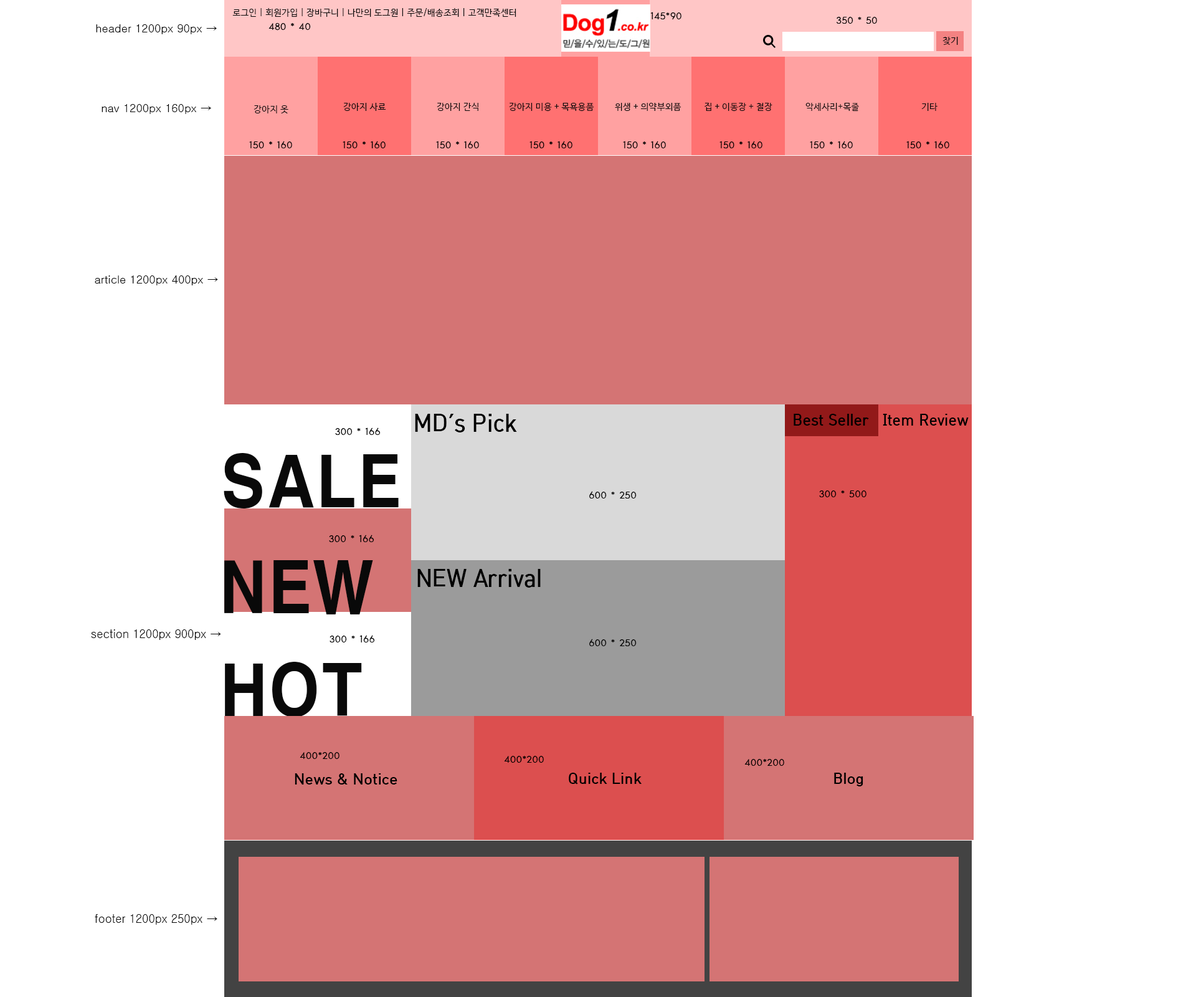
<style>
.page{position:relative;width:1196px;height:997px;background:#ffffff}
.page>*{position:absolute;margin:0}
.t1{font:8.7px "HancomGothicRegular";color:#090909}
.t2{font:11.2px "HancomHoonminjeongeumV";color:#000000}
.t3{font:11.2px "Gulim";color:#090909}
.t4{font:11.2px "HancomHoonminjeongeumV";color:#010101}
.t5{font:24.7px "HCRDotum-Bold";color:#000000;scale:0.91 1}
.t6{font:16.5px "HCRDotum-Bold";color:#000000;scale:0.91 1}
.t7{font:68.7px "H2gtrE";color:#090909;scale:0.91 1}
.t8{font:12.4px "Gulim";color:#090909;scale:0.91 1}
.t9{font:14.9px "HCRDotum-Bold";color:#000000}
</style>
<div class="page">
<p class="t1" style="left:232px;top:8px;width:284px;height:9px">로그인 | 회원가입 | 장바구니 | 나만의 도그원 | 주문/배송조회 | 고객만족센터</p>
<p class="t2" style="left:650px;top:12px;width:32px;height:8px">145*90</p>
<p class="t2" style="left:837px;top:17px;width:40px;height:7px">350 * 50</p>
<p class="t3" style="left:96px;top:24px;width:121px;height:10px">header 1200px 90px →</p>
<p class="t2" style="left:269px;top:23px;width:42px;height:8px">480 * 40</p>
<p class="t1" style="left:943px;top:37px;width:15px;height:8px">찾기</p>
<p class="t3" style="left:102px;top:104px;width:109px;height:10px">nav 1200px 160px →</p>
<p class="t1" style="left:254px;top:105px;width:34px;height:8px">강아지 옷</p>
<p class="t1" style="left:343px;top:103px;width:43px;height:8px">강아지 사료</p>
<p class="t1" style="left:437px;top:103px;width:41px;height:8px">강아지 간식</p>
<p class="t1" style="left:509px;top:102px;width:85px;height:10px">강아지 미용 + 목욕용품</p>
<p class="t1" style="left:615px;top:103px;width:67px;height:8px">위생 + 의약부외품</p>
<p class="t1" style="left:705px;top:103px;width:68px;height:9px">집 + 이동장 + 철장</p>
<p class="t1" style="left:806px;top:103px;width:53px;height:9px">악세사리+목줄</p>
<p class="t1" style="left:921px;top:103px;width:17px;height:8px">기타</p>
<p class="t4" style="left:249px;top:141px;width:43px;height:7px">150 * 160</p>
<p class="t4" style="left:343px;top:141px;width:43px;height:7px">150 * 160</p>
<p class="t4" style="left:436px;top:141px;width:43px;height:7px">150 * 160</p>
<p class="t4" style="left:530px;top:141px;width:43px;height:7px">150 * 160</p>
<p class="t4" style="left:623px;top:141px;width:43px;height:7px">150 * 160</p>
<p class="t4" style="left:720px;top:141px;width:43px;height:7px">150 * 160</p>
<p class="t4" style="left:810px;top:141px;width:43px;height:7px">150 * 160</p>
<p class="t4" style="left:907px;top:141px;width:42px;height:7px">150 * 160</p>
<p class="t3" style="left:95px;top:275px;width:123px;height:10px">article 1200px 400px →</p>
<p class="t5" style="left:415px;top:414px;width:102px;height:18px">MD’s Pick</p>
<p class="t6" style="left:794px;top:414px;width:75px;height:12px">Best Seller</p>
<p class="t6" style="left:883px;top:414px;width:86px;height:12px">Item Review</p>
<p class="t2" style="left:335px;top:427px;width:46px;height:8px">300 * 166</p>
<p class="t7" style="left:224px;top:453px;width:175px;height:55px">SALE</p>
<p class="t2" style="left:589px;top:491px;width:48px;height:7px">600 * 250</p>
<p class="t2" style="left:819px;top:490px;width:48px;height:7px">300 * 500</p>
<p class="t2" style="left:329px;top:535px;width:45px;height:7px">300 * 166</p>
<p class="t7" style="left:224px;top:560px;width:149px;height:54px">NEW</p>
<p class="t5" style="left:417px;top:569px;width:124px;height:19px">NEW Arrival</p>
<p class="t8" style="left:91px;top:629px;width:130px;height:11px">section 1200px 900px →</p>
<p class="t2" style="left:330px;top:635px;width:45px;height:7px">300 * 166</p>
<p class="t2" style="left:589px;top:639px;width:48px;height:7px">600 * 250</p>
<p class="t7" style="left:225px;top:662px;width:137px;height:55px">HOT</p>
<p class="t2" style="left:300px;top:752px;width:40px;height:7px">400*200</p>
<p class="t2" style="left:504px;top:756px;width:40px;height:7px">400*200</p>
<p class="t2" style="left:745px;top:759px;width:39px;height:7px">400*200</p>
<p class="t9" style="left:295px;top:773px;width:102px;height:11px">News &amp; Notice</p>
<p class="t9" style="left:569px;top:773px;width:73px;height:11px">Quick Link</p>
<p class="t9" style="left:834px;top:773px;width:30px;height:13px">Blog</p>
<p class="t8" style="left:95px;top:914px;width:122px;height:11px">footer 1200px 250px →</p>
</div>
